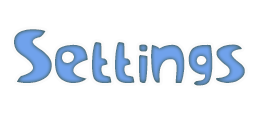
<style>
.page{position:relative;width:256px;height:128px;background:#ffffff}
.page>*{position:absolute;margin:0}
.t1{font:76.8px "Samba";letter-spacing:0.05em}
</style>
<div class="page">
<p class="t1" style="left:14px;top:29px;width:231px;height:57px">Settings</p>
</div>
